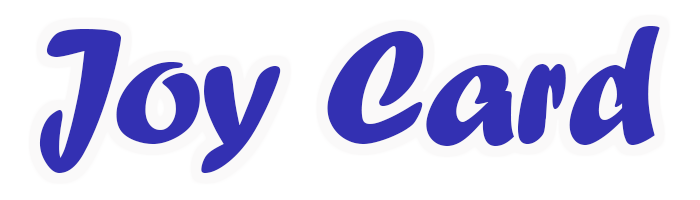
<style>
.page{position:relative;width:700px;height:200px;background:#ffffff}
.page>*{position:absolute;margin:0}
.t1{font:166.7px "ForteMT";letter-spacing:-0.01em;color:#3330b2}
</style>
<div class="page">
<p class="t1" style="left:39px;top:26px;width:621px;height:147px">Joy Card</p>
</div>
